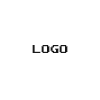
<style>
.page{position:relative;width:100px;height:100px;background:#ffffff}
.page>*{position:absolute;margin:0}
.t1{font:18px "AnotherCastle3";color:#191919}
</style>
<div class="page">
<p class="t1" style="left:32px;top:45px;width:36px;height:8px">logo</p>
</div>
